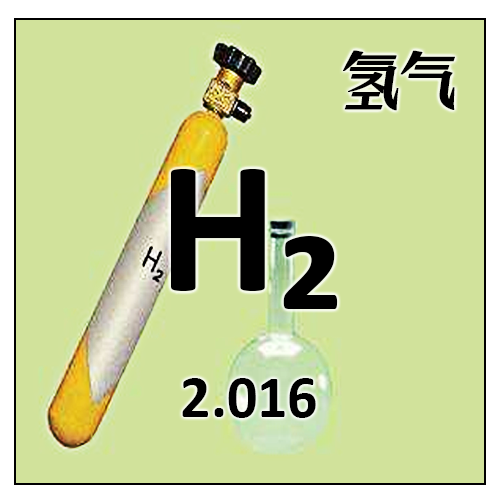
<style>
.page{position:relative;width:500px;height:500px;background:#d1e29b}
.page>*{position:absolute;margin:0}
.t1{font:60px "ZoomlaShuaisongA028";color:#000000;font-weight:bold;scale:0.93 1}
.t2{font:190px "Calibri-Bold";color:#000000}
.t3{font:60px "Calibri-Bold";color:#000000}
</style>
<div class="page">
<p class="t1" style="left:343px;top:50px;width:112px;height:61px">氢气</p>
<p class="t2" style="left:171px;top:169px;width:167px;height:140px">H₂</p>
<p class="t3" style="left:182px;top:378px;width:134px;height:40px">2.016</p>
</div>
